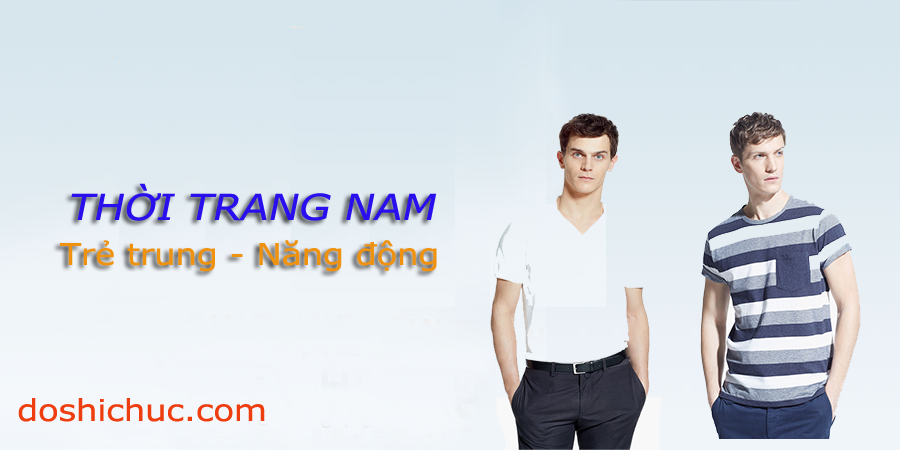
<style>
.page{position:relative;width:900px;height:450px}
.page>*{position:absolute;margin:0}
.t1{font:36px "Verdana";letter-spacing:-0.01em;color:#290fee;font-style:italic;scale:1.14 1}
.t2{font:30px "Verdana";letter-spacing:-0.01em;color:#ee920f;scale:1.14 1}
.t3{font:30px "Verdana";letter-spacing:-0.01em;color:#ee3e0f;scale:1.14 1}
</style>
<div class="page">
<p class="t1" style="left:71px;top:183px;width:366px;height:38px">THỜI TRANG NAM</p>
<p class="t2" style="left:60px;top:240px;width:377px;height:32px">Trẻ trung - Năng động</p>
<p class="t3" style="left:18px;top:398px;width:247px;height:24px">doshichuc.com</p>
</div>
